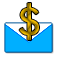
<style>
.page{position:relative;width:57px;height:57px;background:#ffffff}
.page>*{position:absolute;margin:0}
.t1{font:23.5px "OratorStd"}
</style>
<div class="page">
<p class="t1" style="left:19px;top:3px;width:20px;height:37px">$</p>
</div>
